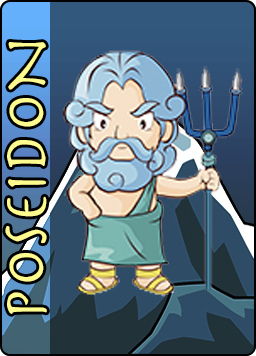
<style>
.page{position:relative;width:256px;height:356px}
.page>*{position:absolute;margin:0}
.t1{font:62.6px "Herculanum";color:#fffc8f}
</style>
<div class="page">
<p class="t1" style="left:5px;top:42px;width:42px;height:272px;rotate:-90deg">POSEIDON</p>
</div>
